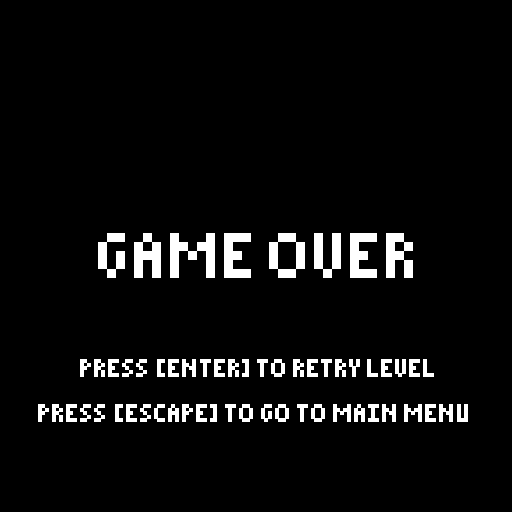
<style>
.page{position:relative;width:512px;height:512px;background:#000000}
.page>*{position:absolute;margin:0}
.t1{font:72px "Pixelated";color:#ffffff}
.t2{font:28px "Pixelated";color:#ffffff}
</style>
<div class="page">
<p class="t1" style="left:98px;top:233px;width:315px;height:45px">GAME OVER</p>
<p class="t2" style="left:80px;top:359px;width:354px;height:18px">PRESS [ENTER] TO RETRY LEVEL</p>
<p class="t2" style="left:38px;top:404px;width:430px;height:18px">PRESS [ESCAPE] TO GO TO MAIN MENU</p>
</div>
